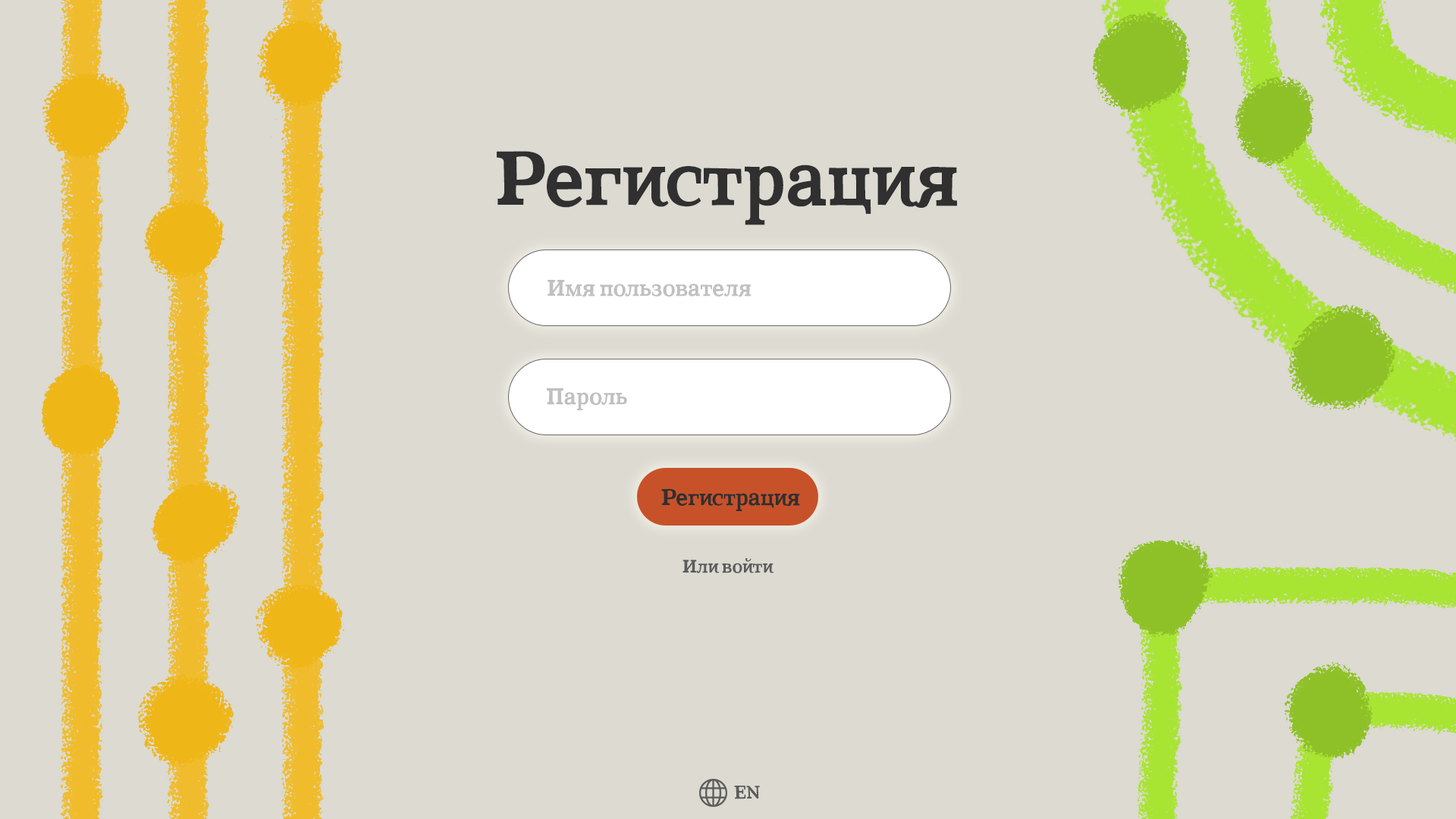
<style>
.page{position:relative;width:1456px;height:819px;background:#dcdad1}
.page>*{position:absolute;margin:0}
.t1{font:75.8px "CoatsBold-Bold";color:#303030}
.t2{font:22.7px "CoatsBold-Bold";color:#c0c0c0}
.t3{font:22.7px "CoatsBold-Bold";color:#303030}
.t4{font:18.2px "CoatsBold-Bold";color:#5c5c5c}
</style>
<div class="page">
<p class="t1" style="left:497px;top:151px;width:460px;height:74px">Регистрация</p>
<p class="t2" style="left:548px;top:280px;width:203px;height:17px">Имя пользователя</p>
<p class="t2" style="left:547px;top:388px;width:80px;height:22px">Пароль</p>
<p class="t3" style="left:661px;top:488px;width:139px;height:23px">Регистрация</p>
<p class="t4" style="left:682px;top:558px;width:92px;height:15px">Или войти</p>
<p class="t4" style="left:734px;top:786px;width:26px;height:13px">EN</p>
</div>
